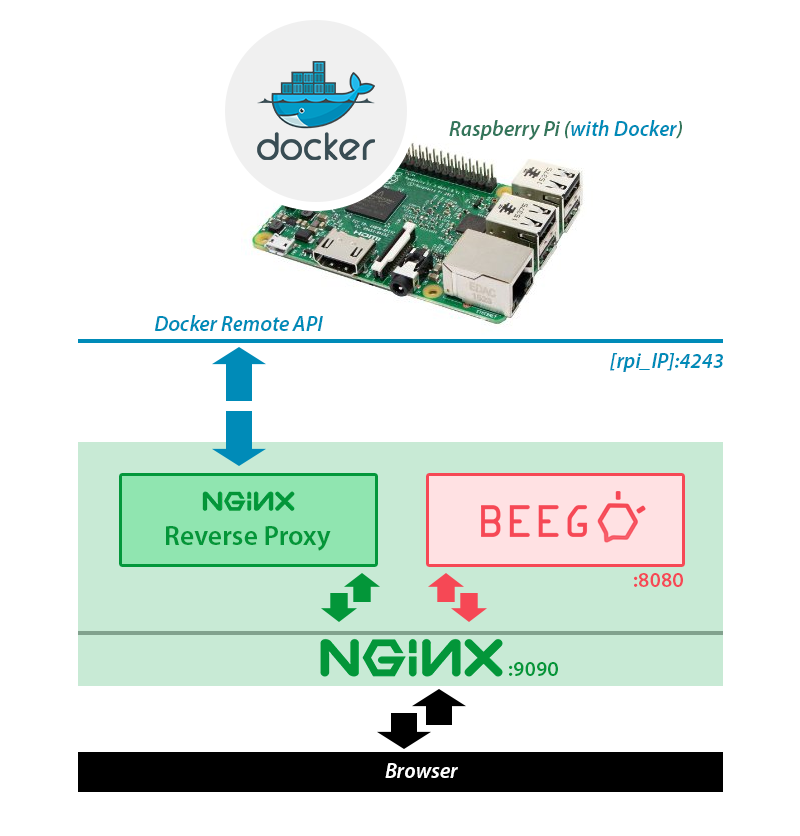
<style>
.page{position:relative;width:800px;height:836px;background:#ffffff}
.page>*{position:absolute;margin:0}
.t1{font:21.3px "MyriadPro-SemiboldIt";color:#34765b}
.t2{font:21.3px "MyriadPro-SemiboldIt";color:#008bb8}
.t3{font:27.6px "MyriadPro-Semibold";color:#039639}
.t4{font:21.3px "MyriadPro-Semibold";color:#f64855}
.t5{font:21.3px "MyriadPro-Semibold";color:#039639}
.t6{font:21.2px "MyriadPro-SemiboldIt";color:#ffffff}
</style>
<div class="page">
<p class="t1" style="left:449px;top:120px;width:233px;height:20px">Raspberry Pi (<span class="t2">with Docker</span>)</p>
<p class="t2" style="left:154px;top:315px;width:169px;height:16px">Docker Remote API</p>
<p class="t2" style="left:610px;top:353px;width:113px;height:19px">[rpi_IP]:4243</p>
<p class="t3" style="left:166px;top:526px;width:165px;height:25px">Reverse Proxy</p>
<p class="t4" style="left:634px;top:573px;width:49px;height:14px">:8080</p>
<p class="t5" style="left:509px;top:662px;width:49px;height:14px">:9090</p>
<p class="t6" style="left:385px;top:763px;width:73px;height:15px">Browser</p>
</div>
